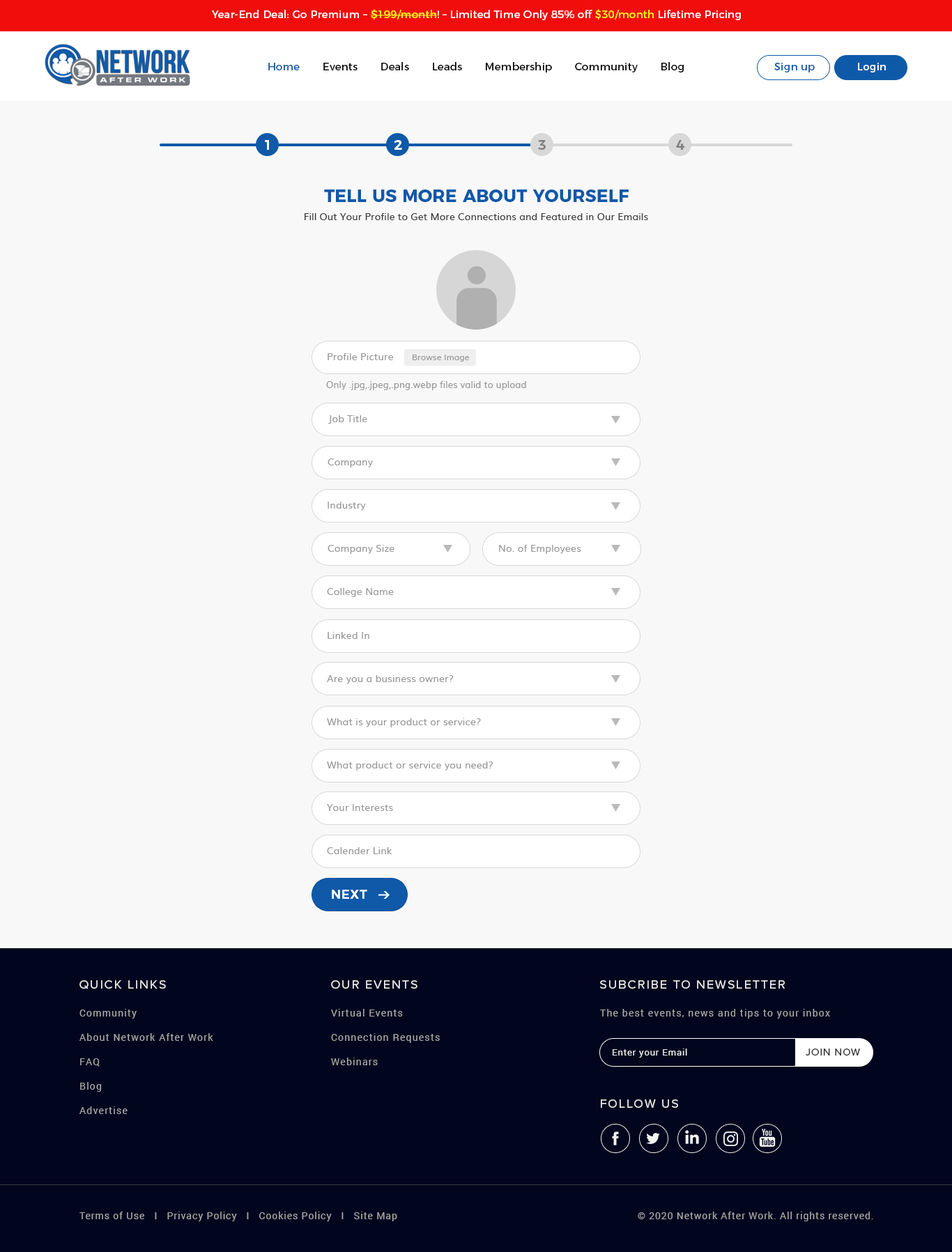
<style>
.page{position:relative;width:952px;height:1252px;background:#f8f8f8}
.page>*{position:absolute;margin:0}
.t1{font:10.5px "Montserrat-Regular";letter-spacing:0.01em;color:#fffefe}
.t2{font:10.5px "Montserrat-Regular";letter-spacing:0.01em;color:#eafd18}
.t3{font:10.5px "Montserrat-Regular";letter-spacing:0.01em;color:#000000}
.t4{font:10.5px "Montserrat-Regular";letter-spacing:0.01em;color:#0f5aa8}
.t5{font:10.5px "Montserrat-Regular";letter-spacing:0.01em;color:#ffffff}
.t6{font:13.9px "Montserrat-SemiBold";letter-spacing:-0.01em;color:#ffffff}
.t7{font:13.9px "Montserrat-SemiBold";letter-spacing:-0.01em;color:#818181}
.t8{font:17.4px "Montserrat-Bold";letter-spacing:0.01em;color:#0f59a8;text-transform:uppercase}
.t9{font:9.8px "Muli";letter-spacing:0.005em;color:#3c3c3c}
.t10{font:9.8px "Muli";letter-spacing:0.01em;color:#999999}
.t11{font:8.4px "Muli";letter-spacing:0.005em;color:#999999}
.t12{font:9.1px "Muli";letter-spacing:0.01em;color:#999999}
.t13{font:12.5px "Montserrat-SemiBold";letter-spacing:0.03em;color:#ffffff}
.t14{font:12.5px "ProximaNova-Regular";letter-spacing:0.105em;color:#e7e7e7;text-transform:uppercase}
.t15{font:9.8px/24.4px "Roboto-Regular";letter-spacing:0.085em;color:#a7a7a7}
.t16{font:9.8px "Roboto-Regular";letter-spacing:0.085em;color:#a7a7a7}
.t17{font:9.1px "Roboto-Regular";letter-spacing:0.065em;color:#e7e7e7}
.t18{font:10.5px "ProximaNova-Regular";letter-spacing:0.065em;color:#262626;text-transform:uppercase}
.t19{font:9.8px "Roboto-Regular";letter-spacing:0.065em;color:#a7a7a7}
</style>
<div class="page">
<p class="t1" style="left:212px;top:9px;width:529px;height:11px">Year-End Deal: Go Premium – <span class="t2">$199/month</span>! – Limited Time Only 85% off <span class="t2">$30/month</span> Lifetime Pricing</p>
<p class="t3" style="left:268px;top:62px;width:416px;height:10px"><span class="t4">Home</span>       Events       Deals       Leads       Membership       Community       Blog</p>
<p class="t4" style="left:774px;top:63px;width:41px;height:9px">Sign up</p>
<p class="t5" style="left:858px;top:63px;width:28px;height:9px">Login</p>
<p class="t6" style="left:265px;top:140px;width:4px;height:10px">1</p>
<p class="t6" style="left:394px;top:140px;width:8px;height:10px">2</p>
<p class="t7" style="left:538px;top:140px;width:8px;height:10px">3</p>
<p class="t7" style="left:676px;top:140px;width:8px;height:10px">4</p>
<p class="t8" style="left:324px;top:190px;width:305px;height:12px">TELL US More About Yourself</p>
<p class="t9" style="left:305px;top:213px;width:343px;height:7px">Fill Out Your Profile to Get More Connections and Featured in Our Emails</p>
<p class="t10" style="left:328px;top:353px;width:66px;height:7px">Profile Picture</p>
<p class="t11" style="left:413px;top:355px;width:56px;height:7px">Browse Image</p>
<p class="t12" style="left:326px;top:381px;width:200px;height:9px">Only .jpg,.jpeg,.png.webp files valid to upload</p>
<p class="t10" style="left:328px;top:415px;width:39px;height:9px">Job Title</p>
<p class="t10" style="left:328px;top:459px;width:45px;height:9px">Company</p>
<p class="t10" style="left:328px;top:502px;width:38px;height:9px">Industry</p>
<p class="t10" style="left:328px;top:545px;width:66px;height:9px">Company Size</p>
<p class="t10" style="left:499px;top:545px;width:82px;height:9px">No. of Employees</p>
<p class="t10" style="left:327px;top:588px;width:67px;height:9px">College Name</p>
<p class="t10" style="left:328px;top:632px;width:41px;height:7px">Linked In</p>
<p class="t10" style="left:327px;top:675px;width:127px;height:9px">Are you a business owner?</p>
<p class="t10" style="left:327px;top:719px;width:154px;height:9px">What is your product or service?</p>
<p class="t10" style="left:327px;top:762px;width:166px;height:9px">What product or service you need?</p>
<p class="t10" style="left:327px;top:804px;width:66px;height:7px">Your Interests</p>
<p class="t10" style="left:327px;top:848px;width:65px;height:6px">Calender Link</p>
<p class="t13" style="left:332px;top:890px;width:35px;height:9px">NEXT</p>
<p class="t14" style="left:79px;top:981px;width:87px;height:9px">Quick Links</p>
<p class="t14" style="left:331px;top:981px;width:86px;height:8px">Our Events</p>
<p class="t14" style="left:600px;top:981px;width:185px;height:8px">SUBCRIBE TO NEWSLETTER</p>
<p class="t15" style="left:79px;top:1009px;width:134px;height:105px">Community<br>About Network After Work<br>FAQ<br>Blog<br>Advertise</p>
<p class="t15" style="left:331px;top:1009px;width:109px;height:57px">Virtual Events<br>Connection Requests<br>Webinars</p>
<p class="t16" style="left:600px;top:1009px;width:230px;height:10px">The best events, news and tips to your inbox</p>
<p class="t17" style="left:613px;top:1049px;width:74px;height:9px">Enter your Email</p>
<p class="t18" style="left:806px;top:1049px;width:54px;height:7px">JOIN NOW</p>
<p class="t14" style="left:601px;top:1100px;width:77px;height:8px">FOLLOW US</p>
<p class="t19" style="left:79px;top:1212px;width:318px;height:10px">Terms of Use   I   Privacy Policy   I   Cookies Policy   I   Site Map</p>
<p class="t19" style="left:638px;top:1212px;width:235px;height:10px">© 2020 Network After Work. All rights reserved.</p>
</div>
